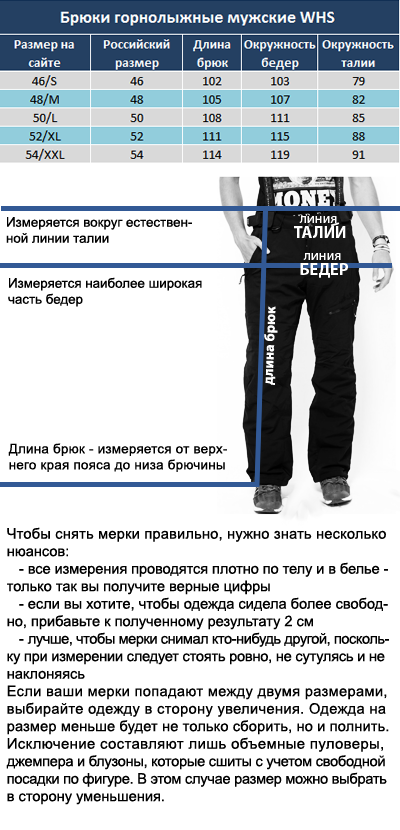
<style>
.page{position:relative;width:400px;height:830px;background:#ffffff}
.page>*{position:absolute;margin:0}
.t1{font:13.3px "ArialMT";color:#000000}
.t2{font:14.2px/14.6px "MyriadPro-Regular";color:#ffffff}
.t3{font:16.7px/14.6px "MyriadPro-Bold";color:#ffffff}
.t4{font:14.2px "MyriadPro-Bold";color:#ffffff}
.t5{font:13.3px "ArialMT";letter-spacing:0.02em;color:#000000}
.t6{font:14.6px "ArialMT";color:#000000}
.t7{font:14.6px "ArialMT";letter-spacing:0.015em;color:#000000}
.t8{font:14.6px "ArialMT";letter-spacing:-0.005em;color:#000000}
.t9{font:14.6px "ArialMT";letter-spacing:-0.03em;color:#000000}
.t10{font:14.6px "ArialMT";letter-spacing:-0.015em;color:#000000}
.t11{font:14.6px "ArialMT";letter-spacing:0.025em;color:#000000}
.t12{font:14.6px "ArialMT";letter-spacing:0.01em;color:#000000}
.t13{font:14.6px "ArialMT";letter-spacing:-0.018em;color:#000000}
</style>
<div class="page">
<p class="t1" style="left:6px;top:217px;width:186px;height:26px">Измеряется вокруг естествен-<br>ной линии талии</p>
<p class="t2" style="left:294px;top:216px;width:52px;height:22px;text-align:center">линия <br><span class="t3">ТАЛИИ</span></p>
<p class="t2" style="left:300px;top:253px;width:48px;height:25px;text-align:center">линия <br><span class="t3">БЕДЕР</span></p>
<p class="t1" style="left:8px;top:277px;width:194px;height:30px">Измеряется наиболее широкая <br>часть бедер</p>
<p class="t4" style="left:264px;top:306px;width:14px;height:79px;rotate:-88deg">длина брюк</p>
<p class="t5" style="left:8px;top:443px;width:219px;height:29px">Длина брюк - измеряется от верх-<br>него края пояса до низа брючины</p>
<p class="t6" style="left:6px;top:527px;width:383px;height:278px"><span class="t7">Чтобы снять мерки правильно, нужно знать несколько <br></span>нюансов:<br>   - <span class="t8">все измерения проводятся плотно по телу и в белье -<br></span>только так вы получите верные цифры<br>   - если вы хотите, чтобы одежда сидела более свобод-<br>но, прибавьте к полученному результату 2 см<br>   - <span class="t9">лучше, чтобы мерки снимал кто-нибудь другой, посколь-<br></span><span class="t10">ку при измерении следует стоять ровно, не сутулясь и не<br></span>наклоняясь<br><span class="t11">Если ваши мерки попадают между двумя размерами, <br>выбирайте одежду в сторону увеличения. Одежда на<br></span><span class="t12">размер меньше будет не только сборить, но и полнить.<br></span><span class="t11">Исключение составляют лишь объемные пуловеры, <br></span><span class="t13">джемпера и блузоны, которые сшиты с учетом свободной<br>посадки по фигуре. В этом случае размер можно выбрать<br></span>в сторону уменьшения.</p>
</div>
